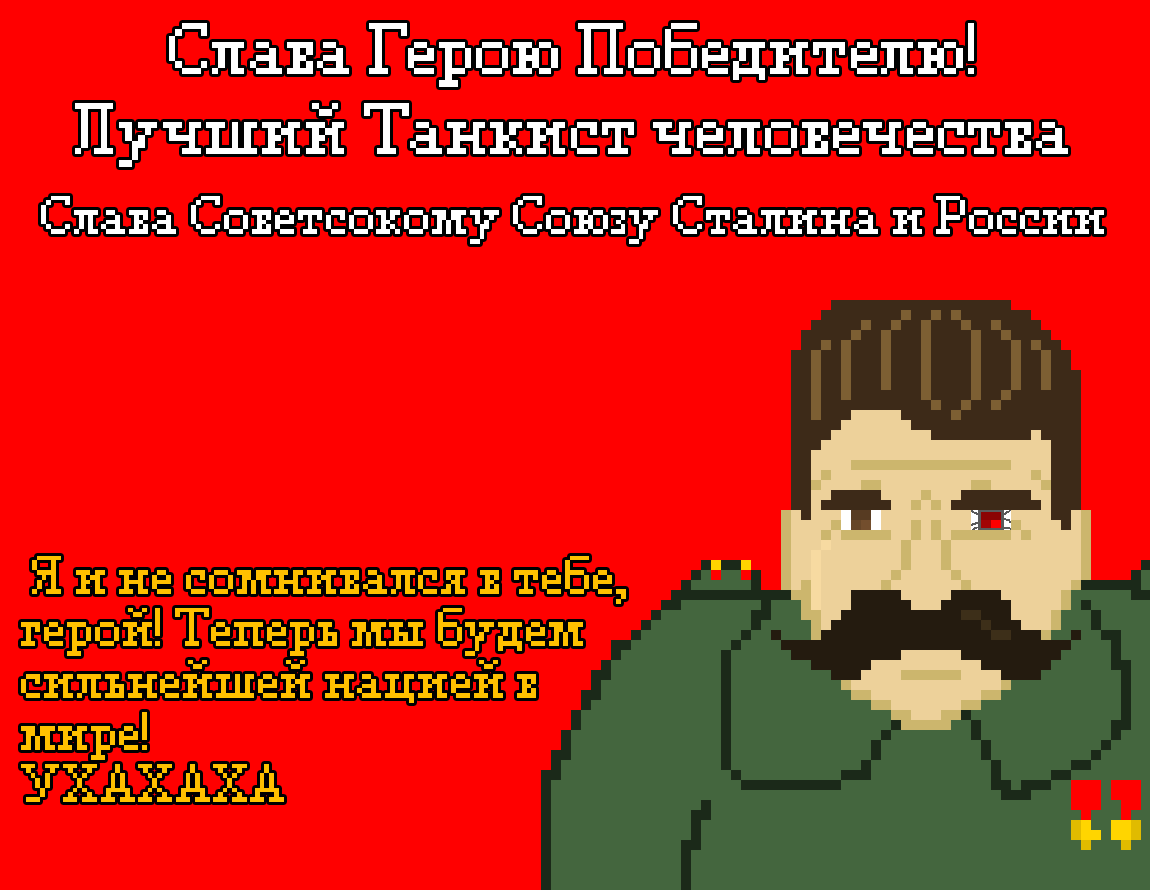
<style>
.page{position:relative;width:1150px;height:890px;background:#ff0000}
.page>*{position:absolute;margin:0}
.t1{font:64px/40px "PixelTimes";letter-spacing:-0.02em;color:#ffffff}
.t2{font:48px/40px "PixelTimes";letter-spacing:-0.02em;color:#ffffff}
.t3{font:48px/52px "PixelTimes";letter-spacing:-0.02em;color:#ffc000}
</style>
<div class="page">
<p class="t1" style="left:41px;top:23px;width:1063px;height:221px;text-align:center">Слава Герою Победителю!<br><br>Лучший Танкист человечества<br><br><span class="t2">Слава Советсокому Союзу Сталина и России</span></p>
<p class="t3" style="left:21px;top:556px;width:605px;height:246px">Я и не сомнивался в тебе,<br>герой! Теперь мы будем сильнейшей нацией в мире!<br>УХАХАХА</p>
</div>
